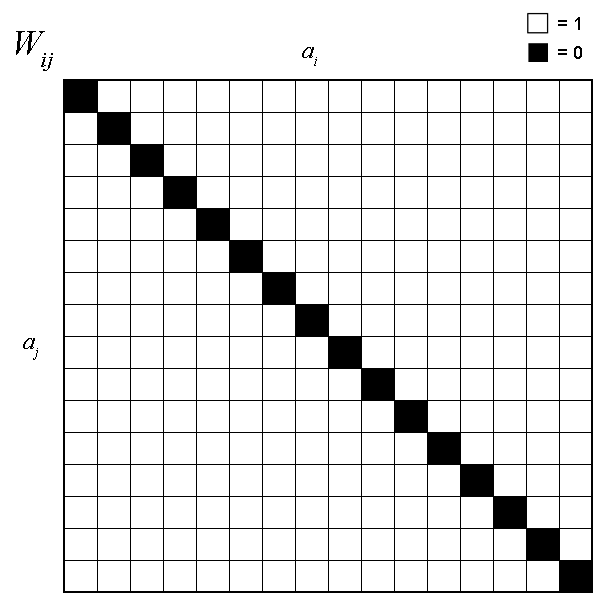
<style>
.page{position:relative;width:600px;height:600px;background:#ffffff}
.page>*{position:absolute;margin:0}
.t1{font:18px "ArialMT";color:#000000}
.t2{font:36px "TimesNewRomanPS-ItalicMT";color:#000000}
.t3{font:24px "TimesNewRomanPS-ItalicMT";color:#000000}
</style>
<div class="page">
<p class="t1" style="left:558px;top:17px;width:22px;height:13px">= 1</p>
<p class="t2" style="left:16px;top:31px;width:37px;height:40px">Wij</p>
<p class="t3" style="left:302px;top:47px;width:15px;height:19px">ai</p>
<p class="t1" style="left:558px;top:46px;width:24px;height:13px">= 0</p>
<p class="t3" style="left:23px;top:338px;width:15px;height:22px">aj</p>
</div>
